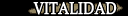
<style>
.page{position:relative;width:128px;height:16px;background:#000000}
.page>*{position:absolute;margin:0}
.t1{font:16.7px "BookAntiqua";color:#ffffff;font-weight:bold;scale:0.83 1}
</style>
<div class="page">
<p class="t1" style="left:33px;top:2px;width:84px;height:13px">VITALIDAD</p>
</div>
